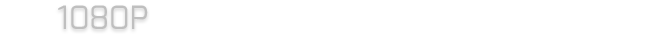
<style>
.page{position:relative;width:648px;height:35px;background:#ffffff}
.page>*{position:absolute;margin:0}
.t1{font:32px "Exo-Regular";color:#bfbfbf;text-transform:uppercase}
</style>
<div class="page">
<p class="t1" style="left:58px;top:5px;width:90px;height:24px">1080p</p>
</div>
